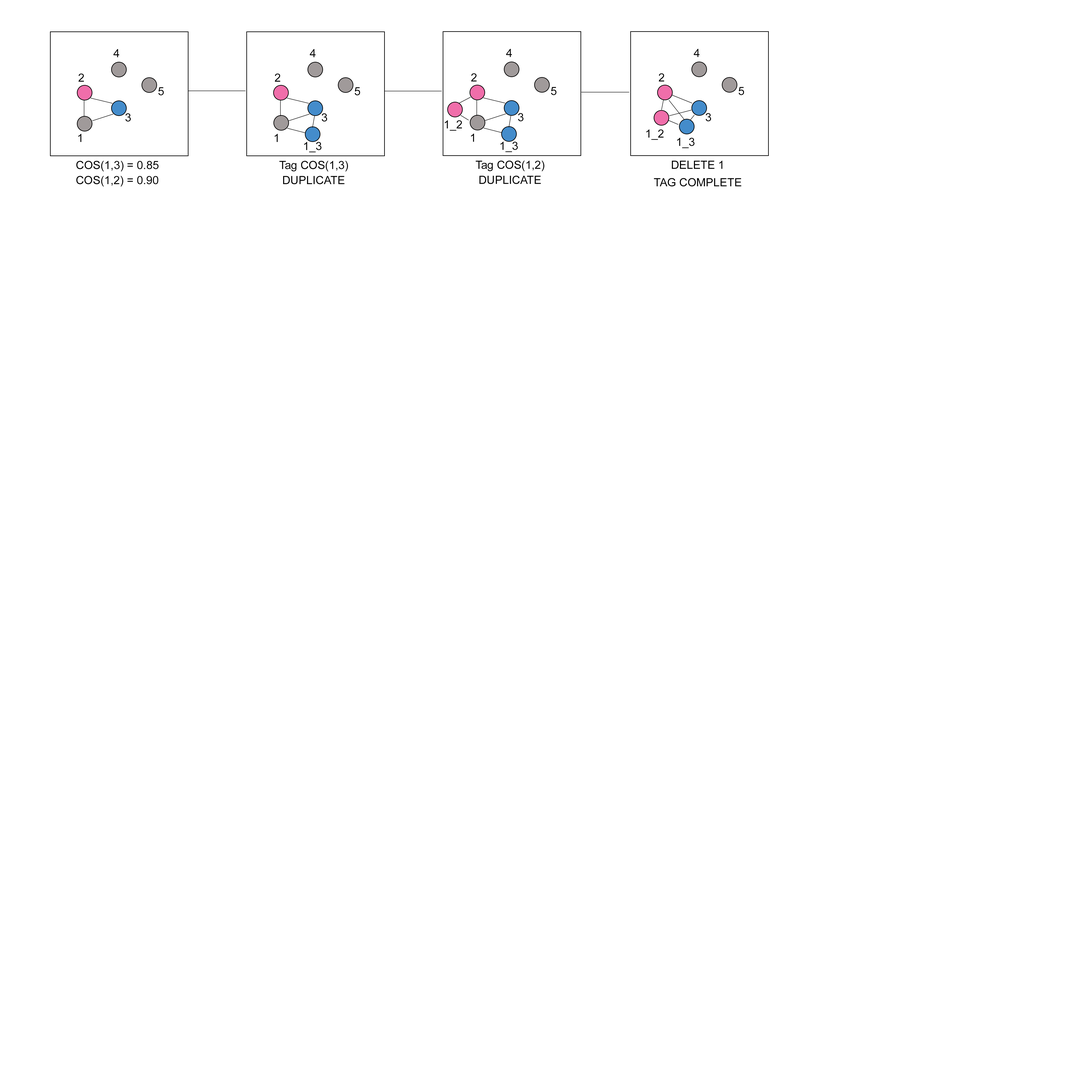
<style>
.page{position:relative;width:1092px;height:1092px;background:#ffffff}
.page>*{position:absolute;margin:0}
.t1{font:11.4px "ArialMT";color:#000000}
.t2{font:11.4px/8.7px "ArialMT";color:#000000}
</style>
<div class="page">
<p class="t1" style="left:113px;top:49px;width:6px;height:8px">4</p>
<p class="t1" style="left:310px;top:49px;width:6px;height:8px">4</p>
<p class="t1" style="left:506px;top:49px;width:6px;height:8px">4</p>
<p class="t1" style="left:694px;top:49px;width:6px;height:8px">4</p>
<p class="t1" style="left:78px;top:73px;width:6px;height:9px">2</p>
<p class="t1" style="left:275px;top:73px;width:5px;height:9px">2</p>
<p class="t1" style="left:471px;top:73px;width:6px;height:8px">2</p>
<p class="t1" style="left:659px;top:73px;width:5px;height:8px">2</p>
<p class="t1" style="left:158px;top:87px;width:6px;height:8px">5</p>
<p class="t1" style="left:355px;top:87px;width:5px;height:8px">5</p>
<p class="t1" style="left:551px;top:87px;width:5px;height:8px">5</p>
<p class="t1" style="left:739px;top:87px;width:5px;height:8px">5</p>
<p class="t1" style="left:125px;top:113px;width:6px;height:9px">3</p>
<p class="t1" style="left:322px;top:113px;width:5px;height:9px">3</p>
<p class="t1" style="left:518px;top:113px;width:5px;height:8px">3</p>
<p class="t1" style="left:706px;top:113px;width:5px;height:8px">3</p>
<p class="t1" style="left:445px;top:120px;width:17px;height:11px">1_2</p>
<p class="t1" style="left:78px;top:134px;width:3px;height:8px">1</p>
<p class="t1" style="left:275px;top:134px;width:3px;height:8px">1</p>
<p class="t1" style="left:471px;top:133px;width:3px;height:9px">1</p>
<p class="t1" style="left:646px;top:129px;width:17px;height:11px">1_2</p>
<p class="t1" style="left:677px;top:138px;width:18px;height:10px">1_3</p>
<p class="t1" style="left:304px;top:142px;width:17px;height:10px">1_3</p>
<p class="t1" style="left:500px;top:142px;width:18px;height:10px">1_3</p>
<p class="t1" style="left:76px;top:161px;width:83px;height:10px">COS(1,3) = 0.85</p>
<p class="t1" style="left:279px;top:161px;width:69px;height:10px">Tag COS(1,3)</p>
<p class="t1" style="left:476px;top:161px;width:68px;height:10px">Tag COS(1,2)</p>
<p class="t2" style="left:654px;top:161px;width:87px;height:26px;text-align:center">DELETE 1<br><br>TAG COMPLETE</p>
<p class="t1" style="left:76px;top:176px;width:82px;height:11px">COS(1,2) = 0.90</p>
<p class="t1" style="left:283px;top:176px;width:61px;height:8px">DUPLICATE</p>
<p class="t1" style="left:479px;top:176px;width:62px;height:8px">DUPLICATE</p>
</div>
